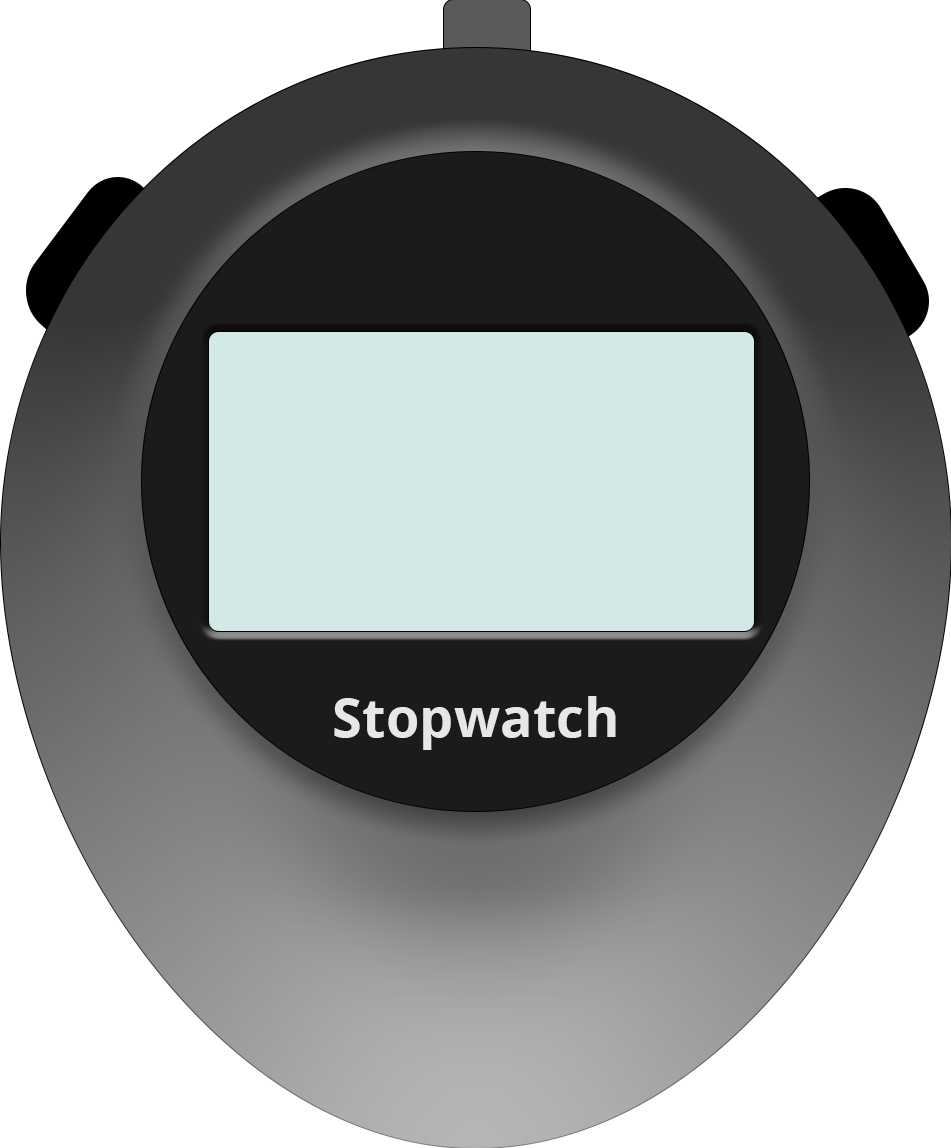
<style>
.page{position:relative;width:951px;height:1148px;background:#ffffff}
.page>*{position:absolute;margin:0}
.t1{font:54.2px "OpenSans-Bold";color:#e7e7e7}
</style>
<div class="page">
<p class="t1" style="left:334px;top:696px;width:282px;height:54px">Stopwatch</p>
</div>
